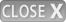
<style>
.page{position:relative;width:66px;height:22px}
.page>*{position:absolute;margin:0}
.t1{font:18px "MyriadPro-Semibold";letter-spacing:0.02em;color:#efefef;scale:0.83 1}
.t2{font:21.4px "MyriadPro-Bold";letter-spacing:0.02em;color:#efefef;scale:1.08 1}
</style>
<div class="page">
<p class="t1" style="left:2px;top:3px;width:62px;height:16px">CLOSE <span class="t2">X</span></p>
</div>
